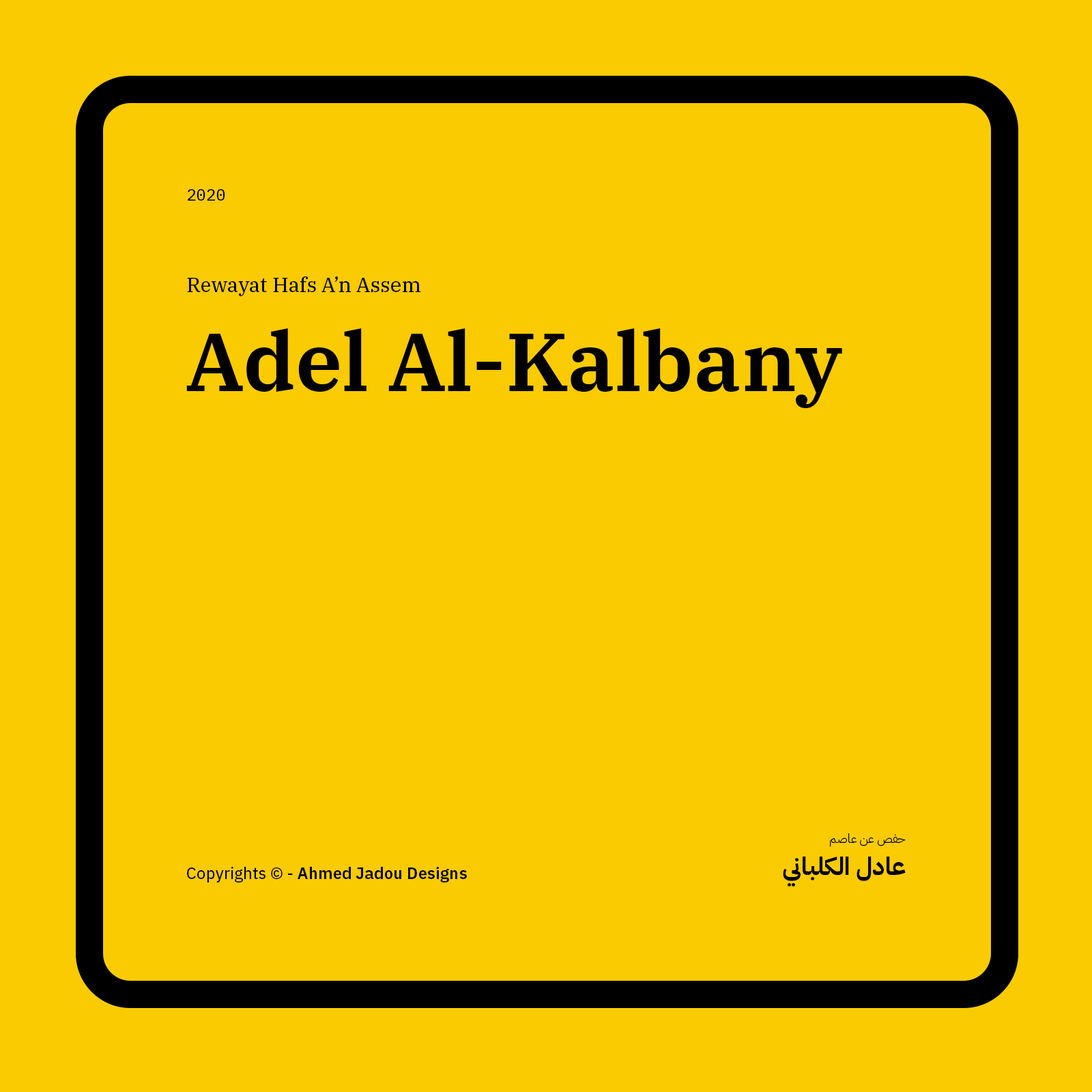
<style>
.page{position:relative;width:1092px;height:1092px;background:#facb00}
.page>*{position:absolute;margin:0}
.t1{font:16.4px "IBMPlexMono-Text";color:#000000}
.t2{font:20.5px "IBMPlexSerif-Text";color:#000000}
.t3{font:81.9px "IBMPlexSerif-SemiBold";color:#000000}
.t4{font:12.3px "IBMPlexArabic-Light";color:#000000}
.t5{font:24.6px "IBMPlexArabic-Bold";color:#000000}
.t6{font:16.4px "IBMPlexSans-SemiBold";color:#000000}
.t7{font:16.4px "IBMPlexSans-Text";color:#000000}
</style>
<div class="page">
<p class="t1" style="left:188px;top:189px;width:37px;height:12px">2020</p>
<p class="t2" style="left:187px;top:276px;width:233px;height:20px">Rewayat Hafs A’n Assem</p>
<p class="t3" style="left:186px;top:328px;width:656px;height:80px">Adel Al-Kalbany</p>
<p class="t4" style="left:830px;top:833px;width:76px;height:14px">حفص عن عاصم</p>
<p class="t5" style="left:783px;top:857px;width:123px;height:30px">عادل الكلباني</p>
<p class="t6" style="left:187px;top:867px;width:280px;height:15px"><span class="t7">Copyrights © - </span>Ahmed Jadou Designs</p>
</div>
